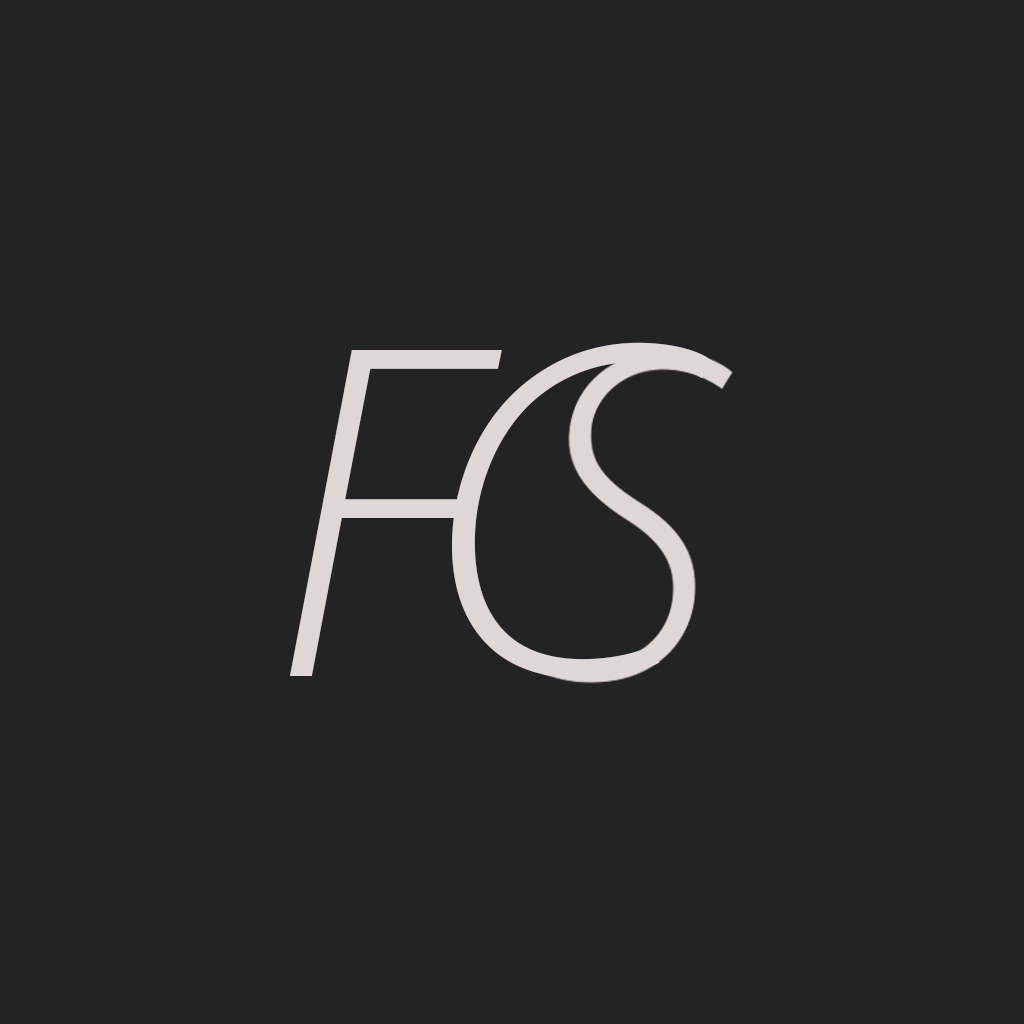
<style>
.page{position:relative;width:1024px;height:1024px;background:#232323}
.page>*{position:absolute;margin:0}
.t1{font:483.5px "MyriadPro-LightIt";color:#dfd6d6;font-variant:small-caps}
</style>
<div class="page">
<p class="t1" style="left:452px;top:342px;width:260px;height:336px;rotate:1deg">C</p>
<p class="t1" style="left:290px;top:350px;width:212px;height:326px">F</p>
</div>
